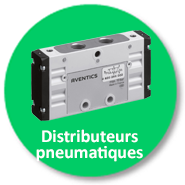
<style>
.page{position:relative;width:185px;height:185px;background:#00cc66}
.page>*{position:absolute;margin:0}
.t1{font:18px/16px "Calibri-Bold";color:#ffffff}
</style>
<div class="page">
<p class="t1" style="left:36px;top:129px;width:107px;height:33px;text-align:center">Distributeurs  <br>pneumatiques</p>
</div>
